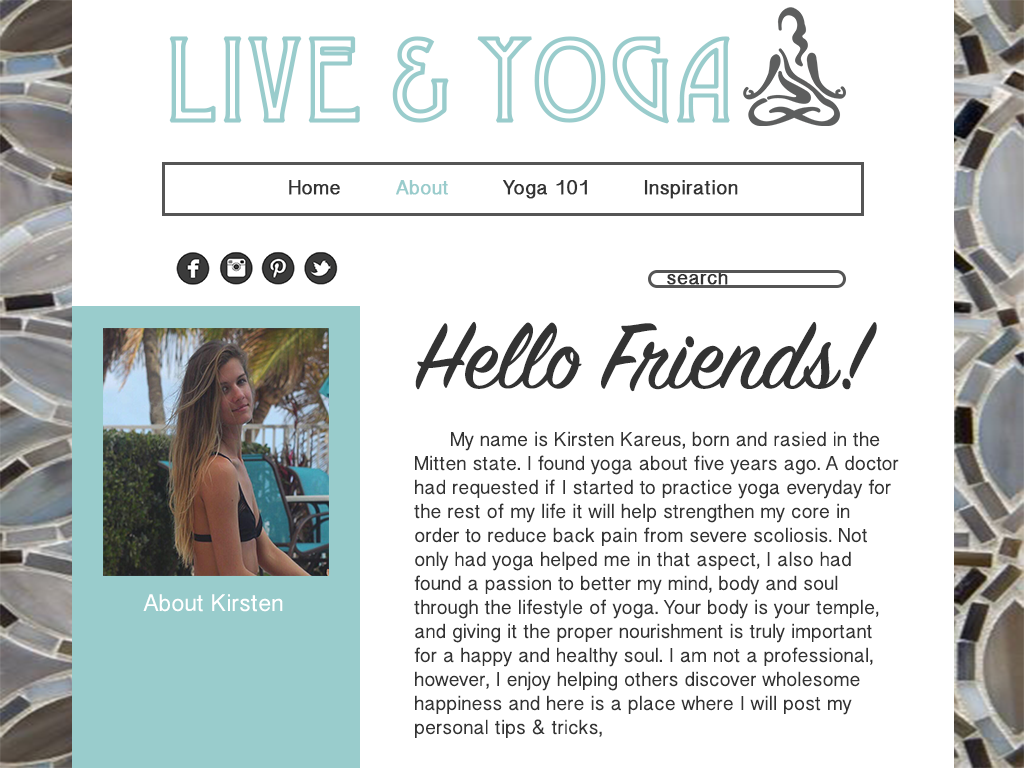
<style>
.page{position:relative;width:1024px;height:768px;background:#ffffff}
.page>*{position:absolute;margin:0}
.t1{font:113px "Desdemona";color:#99cccc;font-weight:bold}
.t2{font:20px "KhmerSangamMN";color:#333333;font-weight:bold}
.t3{font:20px "KhmerSangamMN";color:#99cccc;font-weight:bold}
.t4{font:104px "SignPainter-HouseScript";color:#333333}
.t5{font:20px "KhmerSangamMN";color:#333333}
.t6{font:24px "KhmerSangamMN";color:#ffffff}
</style>
<div class="page">
<p class="t1" style="left:169px;top:36px;width:561px;height:88px">Live &amp; Yoga</p>
<p class="t2" style="left:289px;top:180px;width:51px;height:15px">Home</p>
<p class="t3" style="left:396px;top:180px;width:52px;height:15px">About</p>
<p class="t2" style="left:503px;top:180px;width:84px;height:19px">Yoga 101</p>
<p class="t2" style="left:644px;top:180px;width:94px;height:19px">Inspiration</p>
<p class="t2" style="left:667px;top:270px;width:61px;height:15px">search</p>
<p class="t4" style="left:415px;top:321px;width:462px;height:71px">Hello Friends!</p>
<p class="t5" style="left:414px;top:431px;width:485px;height:307px">My name is Kirsten Kareus, born and rasied in the Mitten state. I found yoga about five years ago. A doctor had requested if I started to practice yoga everyday for the rest of my life it will help strengthen my core in order to reduce back pain from severe scoliosis. Not only had yoga helped me in that aspect, I also had found a passion to better my mind, body and soul through the lifestyle of yoga. Your body is your temple, and giving it the proper nourishment is truly important for a happy and healthy soul. I am not a professional, however, I enjoy helping others discover wholesome happiness and here is a place where I will post my <br>personal tips &amp; tricks,</p>
<p class="t6" style="left:143px;top:594px;width:140px;height:18px">About Kirsten</p>
</div>
